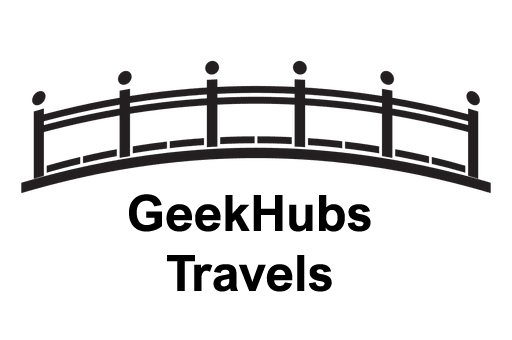
<style>
.page{position:relative;width:512px;height:340px;background:#ffffff}
.page>*{position:absolute;margin:0}
.t1{font:50px "ArialNova-Bold";color:#000000}
</style>
<div class="page">
<p class="t1" style="left:129px;top:194px;width:242px;height:98px;text-align:center">GeekHubs<br>Travels</p>
</div>
